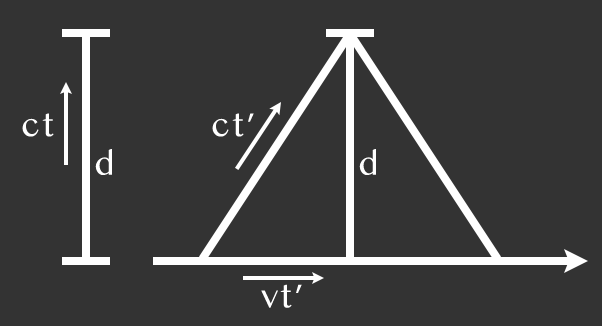
<style>
.page{position:relative;width:602px;height:326px;background:#333333}
.page>*{position:absolute;margin:0}
.t1{font:30px "BanglaMN";letter-spacing:0.045em;color:#ffffff}
.t2{font:30px "Tahoma";letter-spacing:0.045em;color:#ffffff}
</style>
<div class="page">
<p class="t1" style="left:22px;top:113px;width:32px;height:24px">ct</p>
<p class="t1" style="left:212px;top:113px;width:42px;height:24px">ct<span class="t2">’</span></p>
<p class="t1" style="left:95px;top:149px;width:17px;height:26px">d</p>
<p class="t1" style="left:359px;top:149px;width:17px;height:26px">d</p>
<p class="t1" style="left:261px;top:284px;width:41px;height:24px">vt<span class="t2">’</span></p>
</div>
